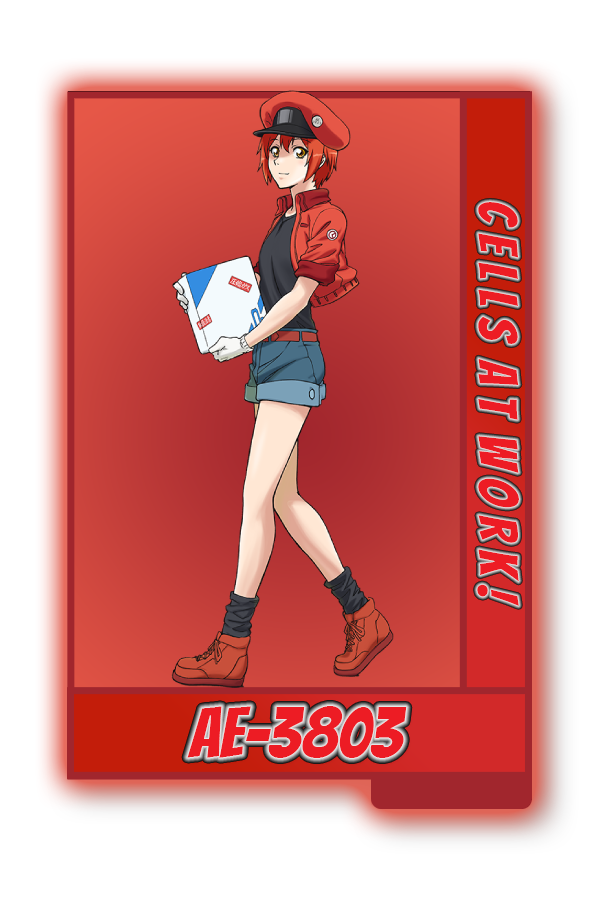
<style>
.page{position:relative;width:600px;height:900px;background:#ffffff}
.page>*{position:absolute;margin:0}
.t1{font:54px "Bangers-Regular";color:#ed1c24}
.t2{font:70px "Bangers-Regular";color:#ed1c24}
</style>
<div class="page">
<p class="t1" style="left:477px;top:202px;width:42px;height:404px;rotate:90deg">C e l l S  A t  W o r k !</p>
<p class="t2" style="left:187px;top:706px;width:220px;height:52px">AE-3803</p>
</div>
